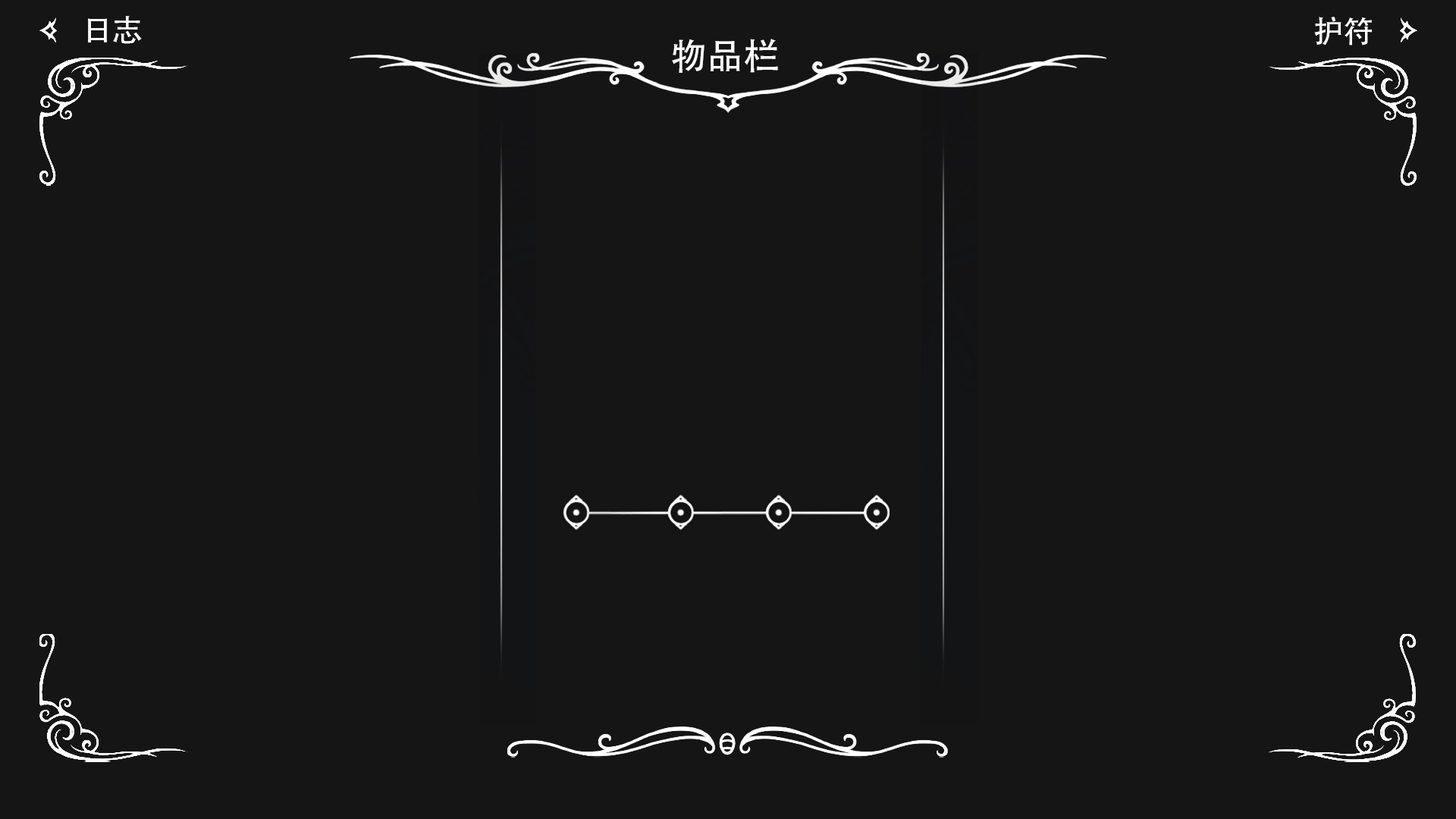
<style>
.page{position:relative;width:1456px;height:819px;background:#151516}
.page>*{position:absolute;margin:0}
.t1{font:30.3px "AdobeHeitiStd-Regular";color:#ffffff}
.t2{font:36.4px "AdobeHeitiStd-Regular";color:#ffffff}
</style>
<div class="page">
<p class="t1" style="left:88px;top:16px;width:54px;height:28px">日志</p>
<p class="t1" style="left:1314px;top:17px;width:58px;height:28px">护符</p>
<p class="t2" style="left:672px;top:39px;width:106px;height:34px">物品栏</p>
</div>
